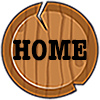
<style>
.page{position:relative;width:100px;height:100px;background:#ffffff}
.page>*{position:absolute;margin:0}
.t1{font:30.1px "AmericanTypewriter-CondensedBold";color:#000000}
</style>
<div class="page">
<p class="t1" style="left:13px;top:39px;width:74px;height:22px">HOME</p>
</div>
